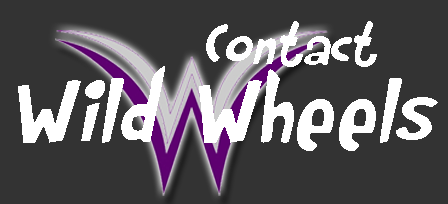
<style>
.page{position:relative;width:448px;height:204px;background:#333333}
.page>*{position:absolute;margin:0}
.t1{font:60px "Rumpelstiltskin";color:#ffffff;font-style:italic}
.t2{font:100px "Rumpelstiltskin";color:#ffffff;font-style:italic}
</style>
<div class="page">
<p class="t1" style="left:206px;top:21px;width:171px;height:46px">Contact</p>
<p class="t2" style="left:18px;top:66px;width:420px;height:85px">Wild Wheels</p>
</div>
